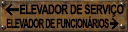
<style>
.page{position:relative;width:128px;height:32px}
.page>*{position:absolute;margin:0}
.t1{font:13.3px "Arial-BoldMT";letter-spacing:-0.04em;color:#000000;text-transform:uppercase;scale:0.7 1}
.t2{font:12.7px "Arial-BoldMT";letter-spacing:-0.06em;color:#000000;text-transform:uppercase;scale:0.59 1}
</style>
<div class="page">
<p class="t1" style="left:20px;top:4px;width:104px;height:13px">Elevador de serviço</p>
<p class="t2" style="left:6px;top:16px;width:103px;height:13px">Elevador dE funcionárioS</p>
</div>
